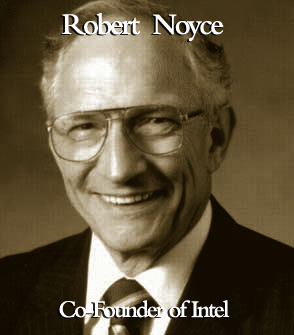
<style>
.page{position:relative;width:294px;height:335px}
.page>*{position:absolute;margin:0}
.t1{font:31.2px "BemboMT-SemiBold";letter-spacing:-0.08em;color:#ffffff;scale:0.95 1}
.t2{font:25px "BemboMT-SemiBold";letter-spacing:-0.08em;color:#ffffff;scale:0.95 1}
</style>
<div class="page">
<p class="t1" style="left:62px;top:13px;width:162px;height:29px">Robert  Noyce</p>
<p class="t2" style="left:59px;top:300px;width:171px;height:18px">Co-Founder of Intel</p>
</div>
